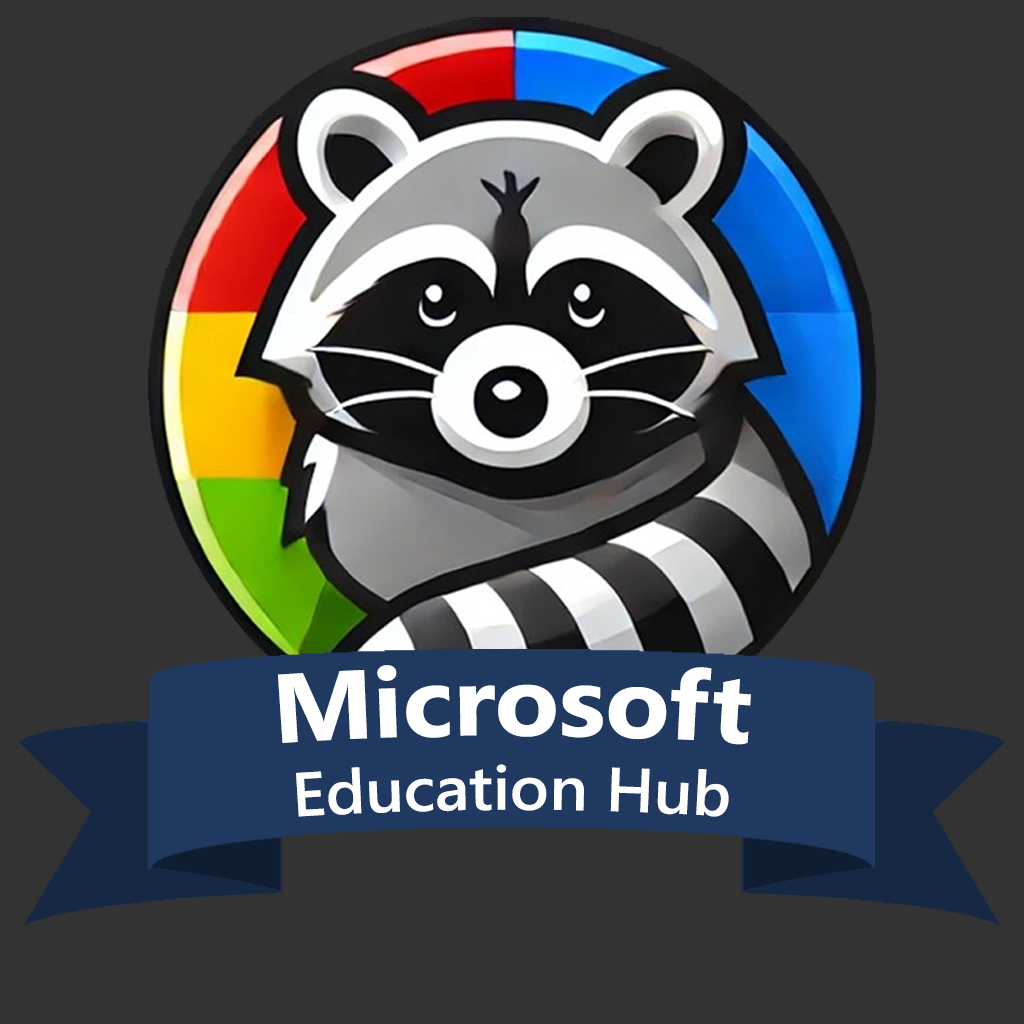
<style>
.page{position:relative;width:1024px;height:1024px;background:#333333}
.page>*{position:absolute;margin:0}
.t1{font:62.1px "SegoeUI-Semibold";color:#ffffff}
.t2{font:97px "SegoeUI-Bold";color:#ffffff}
</style>
<div class="page">
<p class="t1" style="left:278px;top:665px;width:473px;height:152px;text-align:center"><span class="t2">Microsoft<br></span>Education Hub</p>
</div>
